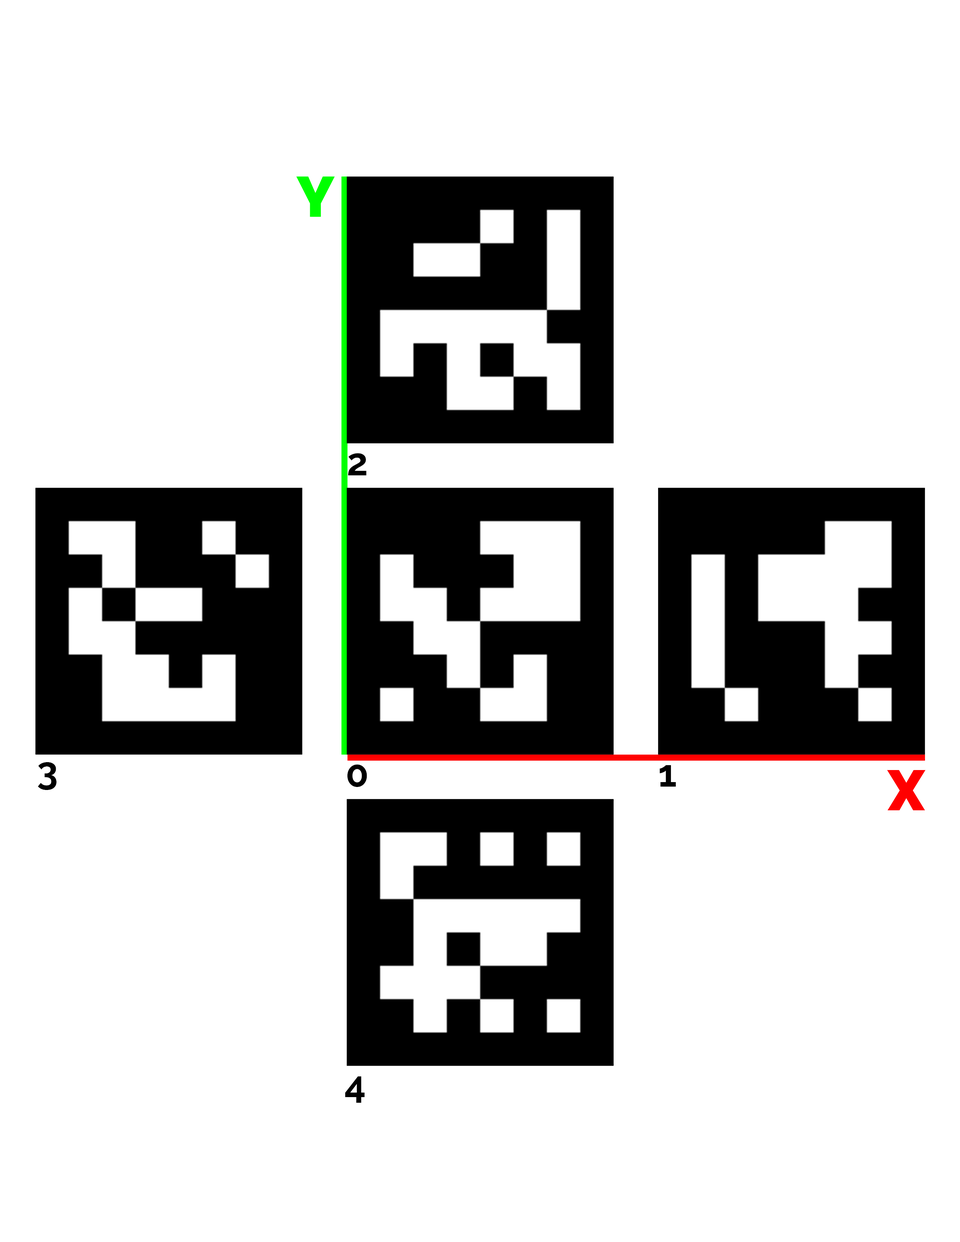
<style>
.page{position:relative;width:960px;height:1242px;background:#ffffff}
.page>*{position:absolute;margin:0}
.t1{font:56.5px "RalewayRoman-Black";color:#00ff00}
.t2{font:37.6px "RalewayRoman-Bold";color:#000000}
.t3{font:56.5px "RalewayRoman-Black";color:#ff0000}
</style>
<div class="page">
<p class="t1" style="left:296px;top:177px;width:39px;height:40px">Y</p>
<p class="t2" style="left:348px;top:453px;width:18px;height:22px">2</p>
<p class="t2" style="left:38px;top:762px;width:18px;height:28px">3</p>
<p class="t2" style="left:347px;top:765px;width:20px;height:22px">0</p>
<p class="t2" style="left:660px;top:765px;width:16px;height:22px">1</p>
<p class="t3" style="left:887px;top:770px;width:39px;height:40px">X</p>
<p class="t2" style="left:345px;top:1077px;width:20px;height:26px">4</p>
</div>
